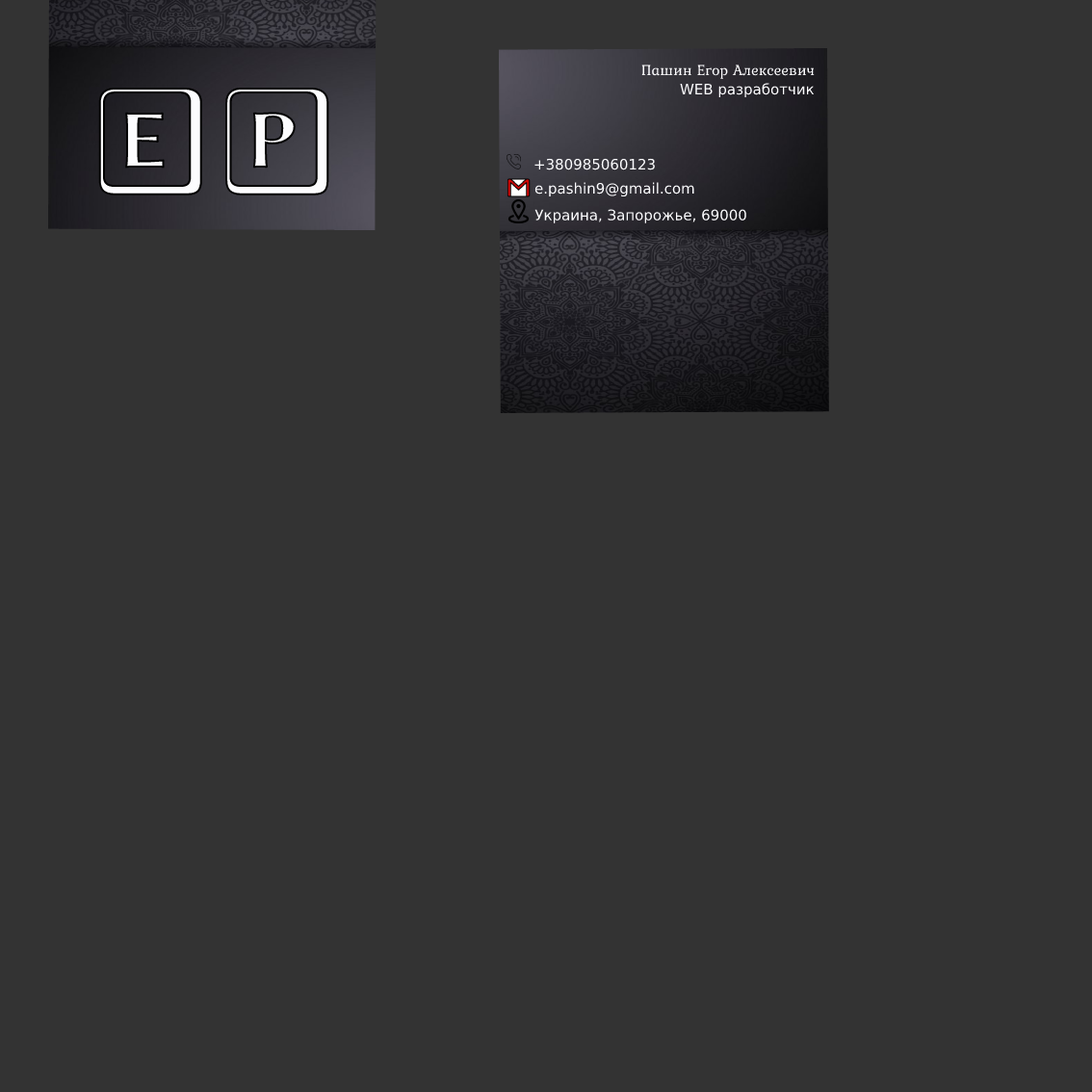
<style>
.page{position:relative;width:1092px;height:1092px;background:#333333}
.page>*{position:absolute;margin:0}
.t1{font:15.4px "Kurale-Regular";color:#fcfcfe}
.t2{font:109.4px "LibertinusKeyboard-Regular";scale:1.05 1}
.t3{font:14.4px "DejaVuSans";color:#fcfcfe}
</style>
<div class="page">
<p class="t1" style="left:641px;top:65px;width:174px;height:14px">Пашин Егор Алексеевич</p>
<p class="t2" style="left:98px;top:87px;width:231px;height:108px">EP</p>
<p class="t3" style="left:680px;top:83px;width:135px;height:15px">WEB разработчик</p>
<p class="t3" style="left:534px;top:158px;width:121px;height:12px">+380985060123</p>
<p class="t3" style="left:534px;top:209px;width:212px;height:14px">Украина, Запорожье, 69000</p>
</div>
